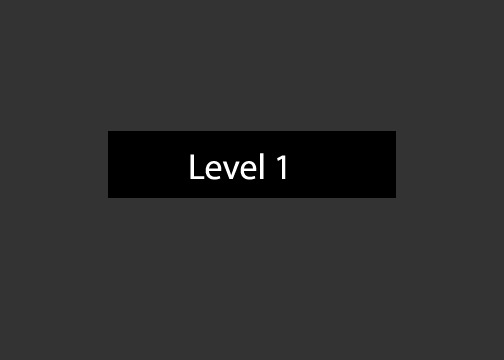
<style>
.page{position:relative;width:504px;height:360px;background:#333333}
.page>*{position:absolute;margin:0}
.t1{font:36px "MyriadPro-Regular";color:#ffffff}
</style>
<div class="page">
<p class="t1" style="left:190px;top:153px;width:96px;height:27px">Level 1</p>
</div>
